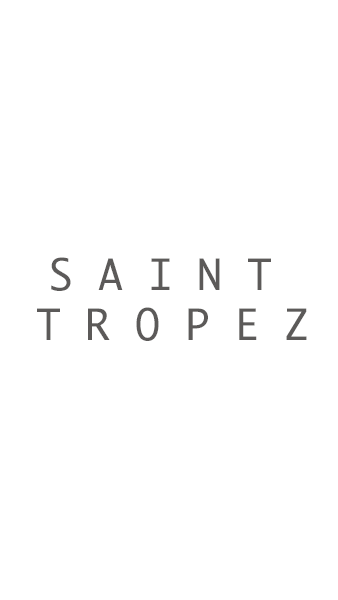
<style>
.page{position:relative;width:338px;height:600px;background:#ffffff}
.page>*{position:absolute;margin:0}
.t1{font:41.7px "Ayuthaya";color:#5c5a59}
</style>
<div class="page">
<p class="t1" style="left:37px;top:257px;width:270px;height:84px;text-align:center">S A I N T <br>T R O P E Z</p>
</div>
